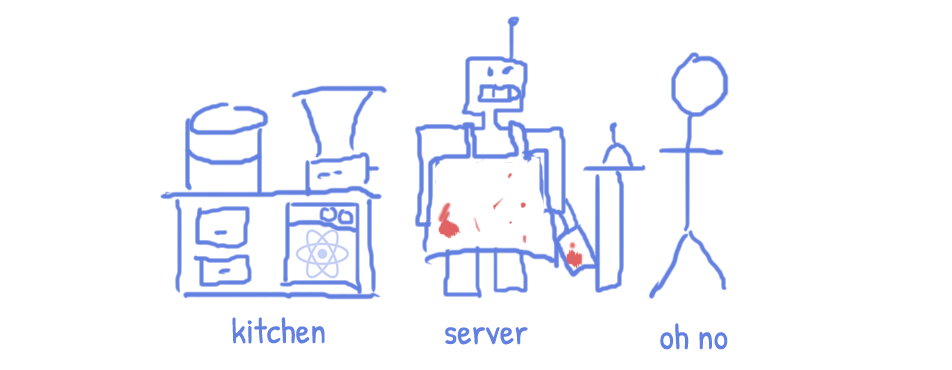
<style>
.page{position:relative;width:952px;height:370px;background:#ffffff}
.page>*{position:absolute;margin:0}
.t1{font:36px "PatrickHand-Regular";color:#6280e0}
</style>
<div class="page">
<p class="t1" style="left:232px;top:317px;width:93px;height:27px">kitchen</p>
<p class="t1" style="left:445px;top:327px;width:83px;height:18px">server</p>
<p class="t1" style="left:660px;top:323px;width:68px;height:27px">oh no</p>
</div>
